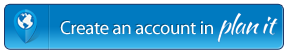
<style>
.page{position:relative;width:287px;height:53px;background:#007ac0}
.page>*{position:absolute;margin:0}
.t1{font:18.7px "MyriadPro-Regular";letter-spacing:-0.015em;color:#ffffff}
</style>
<div class="page">
<p class="t1" style="left:60px;top:21px;width:153px;height:14px">Create an account in</p>
</div>
